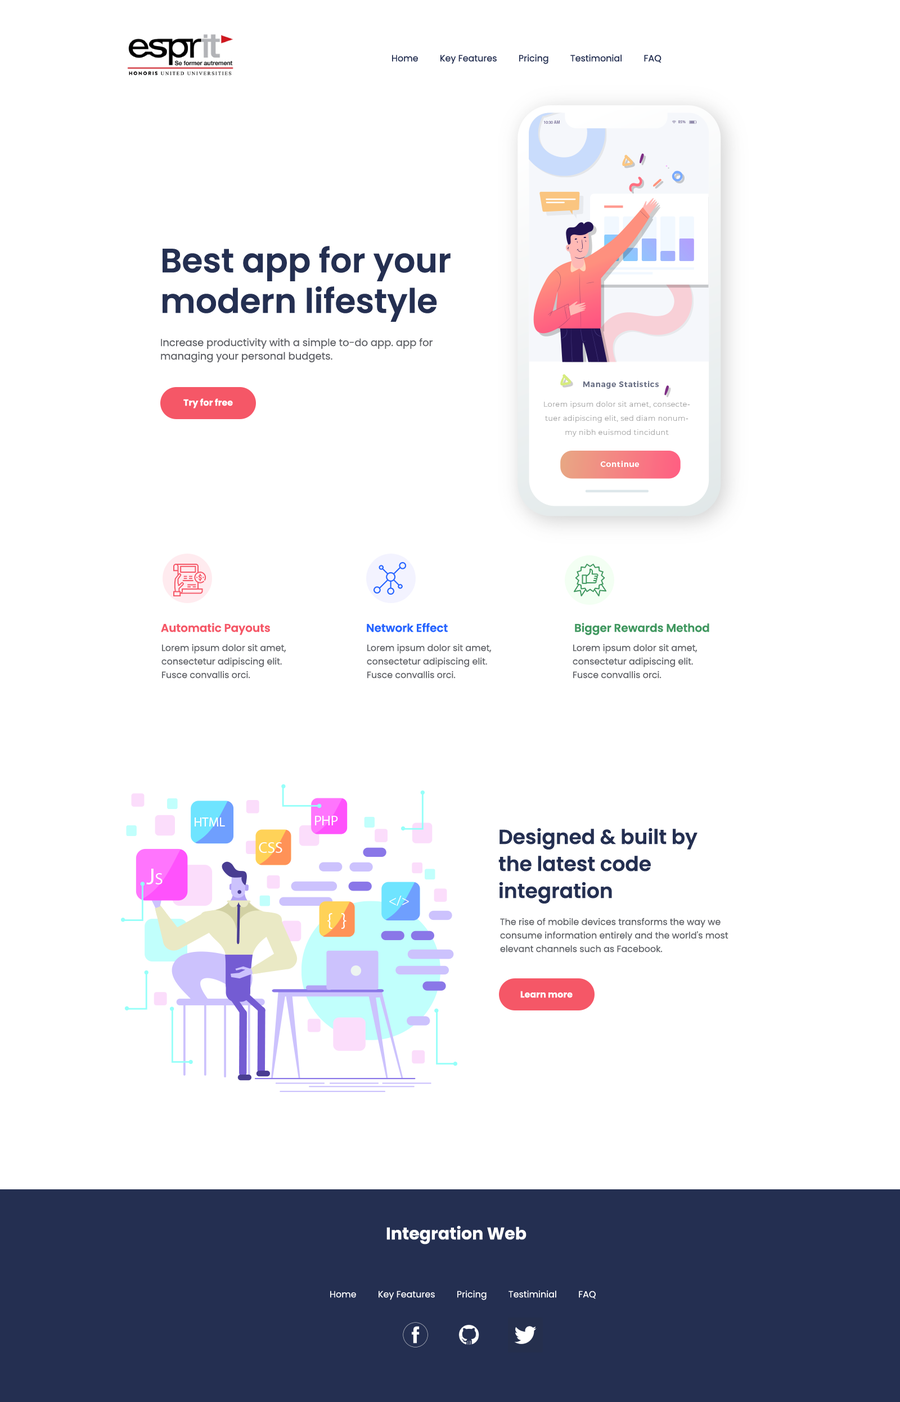
<style>
.page{position:relative;width:900px;height:1402px;background:#ffffff}
.page>*{position:absolute;margin:0}
.t1{font:9px "Poppins-Regular";color:#242f51}
.t2{font:33.8px/40.5px "Poppins-SemiBold";color:#242f51}
.t3{font:10.1px/13.5px "Poppins-Regular";color:#616368}
.t4{font:9px "Poppins-Bold";color:#ffffff}
.t5{font:11.2px "Poppins-SemiBold";color:#f55767}
.t6{font:11.2px "Poppins-SemiBold";color:#2563ff}
.t7{font:11.2px "Poppins-SemiBold";color:#40975f}
.t8{font:9px/13.5px "Poppins-Regular";color:#616368}
.t9{font:20.2px/27px "Poppins-SemiBold";color:#242f51}
.t10{font:16.9px "Poppins-Bold";color:#fefefe}
.t11{font:9px "Poppins-Regular";color:#ffffff}
</style>
<div class="page">
<p class="t1" style="left:392px;top:54px;width:270px;height:10px">Home         Key Features         Pricing         Testimonial         FAQ</p>
<p class="t2" style="left:163px;top:246px;width:288px;height:76px">Best app for your<br>modern lifestyle</p>
<p class="t3" style="left:161px;top:338px;width:272px;height:24px">Increase productivity with a simple to-do app. app for<br>managing your personal budgets.</p>
<p class="t4" style="left:183px;top:398px;width:50px;height:10px">Try for free</p>
<p class="t5" style="left:161px;top:623px;width:109px;height:12px">Automatic Payouts</p>
<p class="t6" style="left:367px;top:623px;width:81px;height:9px">Network Effect</p>
<p class="t7" style="left:575px;top:623px;width:134px;height:12px">Bigger Rewards Method</p>
<p class="t8" style="left:161px;top:644px;width:125px;height:34px">Lorem ipsum dolor sit amet, <br>consectetur adipiscing elit. <br>Fusce convallis orci.</p>
<p class="t8" style="left:367px;top:644px;width:125px;height:34px">Lorem ipsum dolor sit amet, <br>consectetur adipiscing elit. <br>Fusce convallis orci.</p>
<p class="t8" style="left:573px;top:644px;width:125px;height:34px">Lorem ipsum dolor sit amet, <br>consectetur adipiscing elit. <br>Fusce convallis orci.</p>
<p class="t9" style="left:498px;top:827px;width:200px;height:76px">Designed &amp; built by<br>the latest code<br>integration</p>
<p class="t8" style="left:500px;top:917px;width:228px;height:35px">The rise of mobile devices transforms the way we<br>consume information entirely and the world's most<br>elevant channels such as Facebook.</p>
<p class="t4" style="left:520px;top:991px;width:53px;height:7px">Learn more</p>
<p class="t10" style="left:386px;top:1225px;width:140px;height:19px">Integration Web</p>
<p class="t11" style="left:330px;top:1290px;width:266px;height:10px">Home         Key Features         Pricing         Testiminial         FAQ</p>
</div>
